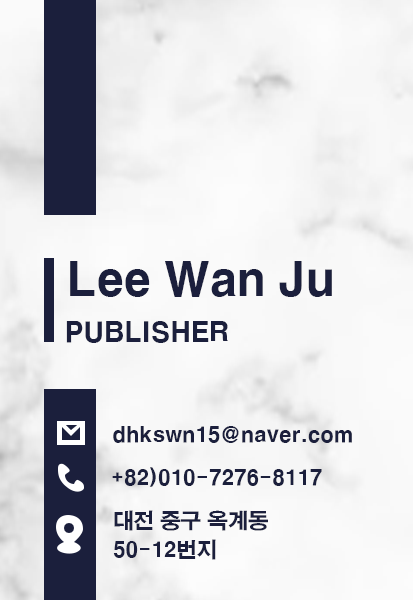
<style>
.page{position:relative;width:413px;height:600px}
.page>*{position:absolute;margin:0}
.t1{font:46px "H2gtrE";letter-spacing:-0.03em;color:#1b1f3c}
.t2{font:27px "H2gtrE";letter-spacing:-0.03em;color:#1b1f3c}
.t3{font:21px "H2gtrE";letter-spacing:-0.03em;color:#1b1f3c}
.t4{font:21px/29px "H2gtrE";letter-spacing:-0.03em;color:#1b1f3c}
</style>
<div class="page">
<p class="t1" style="left:70px;top:261px;width:262px;height:36px">Lee Wan Ju</p>
<p class="t2" style="left:66px;top:321px;width:162px;height:22px">PUBLISHER</p>
<p class="t3" style="left:113px;top:426px;width:239px;height:17px">dhkswn15@naver.com</p>
<p class="t3" style="left:112px;top:467px;width:210px;height:20px">+82)010-7276-8117</p>
<p class="t4" style="left:113px;top:510px;width:155px;height:50px">대전 중구 옥계동<br>50-12번지</p>
</div>
